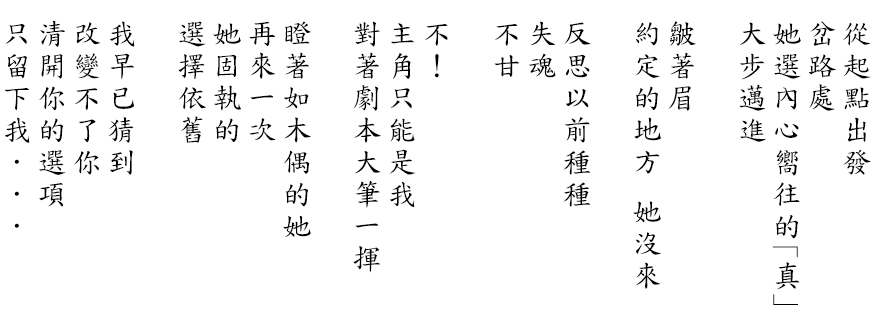
<style>
.page{position:relative;width:875px;height:324px;background:#ffffff}
.page>*{position:absolute;margin:0}
.t1{font:29.2px "DFKaiShu-SB-Estd-BF";letter-spacing:0.1em;color:#000000}
</style>
<div class="page">
<p class="t1" style="left:4px;top:20px;width:867px;height:285px;text-align:justify">從起點出發<br>岔路處<br>她選內心嚮往的｢真｣<br>大步邁進<br><br>皺著眉<br>約定的地方 她沒來<br><br>反思以前種種<br>失魂<br>不甘<br><br>不！<br>主角只能是我<br>對著劇本大筆一揮<br><br>瞪著如木偶的她<br>再來一次<br>她固執的 <br>選擇依舊<br><br>我早已猜到<br>改變不了你<br>清開你的選項<br>只留下我．．．</p>
</div>
